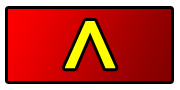
<style>
.page{position:relative;width:180px;height:90px}
.page>*{position:absolute;margin:0}
.t1{font:100px "MyriadPro-Regular";color:#ffff00;font-weight:bold}
</style>
<div class="page">
<p class="t1" style="left:65px;top:21px;width:51px;height:48px">^</p>
</div>
